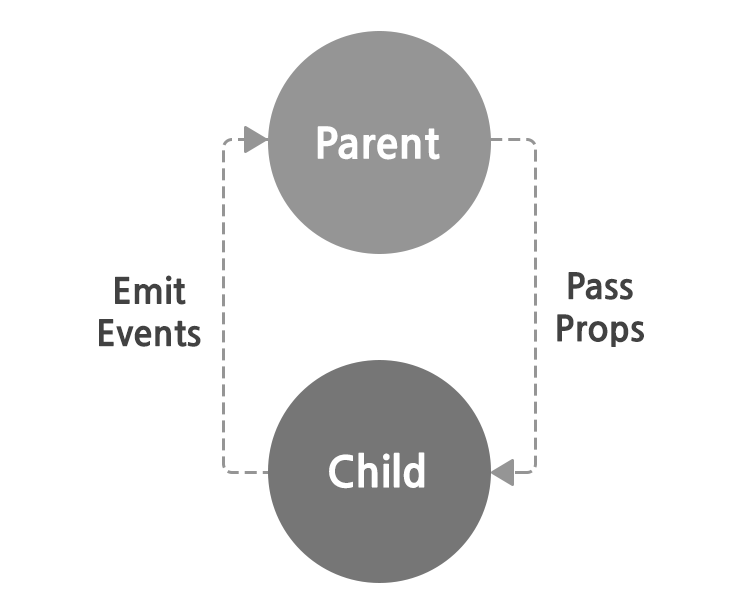
<style>
.page{position:relative;width:743px;height:613px;background:#ffffff}
.page>*{position:absolute;margin:0}
.t1{font:42.3px "NanumGothicExtraBold";color:#ffffff}
.t2{font:35.2px "NanumGothicExtraBold";color:#424242}
</style>
<div class="page">
<p class="t1" style="left:317px;top:126px;width:123px;height:34px">Parent</p>
<p class="t2" style="left:99px;top:275px;width:102px;height:72px;text-align:center">Emit<br>Events</p>
<p class="t2" style="left:557px;top:272px;width:87px;height:75px;text-align:center">Pass<br>Props</p>
<p class="t1" style="left:329px;top:452px;width:96px;height:37px">Child</p>
</div>
